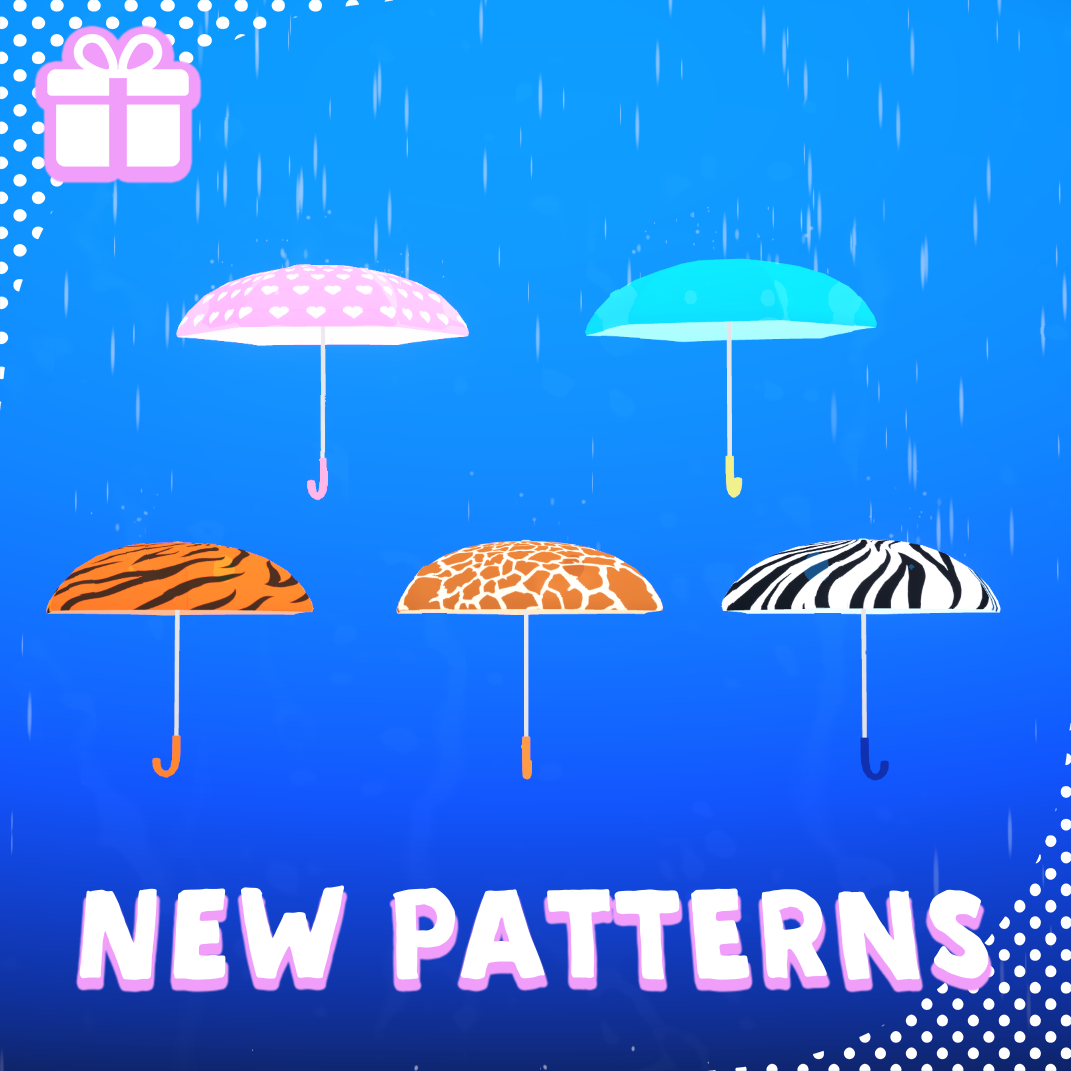
<style>
.page{position:relative;width:1071px;height:1071px}
.page>*{position:absolute;margin:0}
.t1{font:130.3px "SDSans-FillOne";color:#ffffff;scale:0.96 1}
</style>
<div class="page">
<p class="t1" style="left:79px;top:885px;width:910px;height:96px">NEW PATTERNS</p>
</div>
